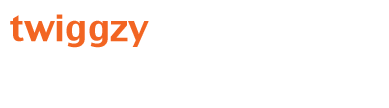
<style>
.page{position:relative;width:389px;height:108px;background:#ffffff}
.page>*{position:absolute;margin:0}
.t1{font:35px "CharcoalCY";color:#f26522}
</style>
<div class="page">
<p class="t1" style="left:10px;top:14px;width:139px;height:34px">twiggzy</p>
</div>
